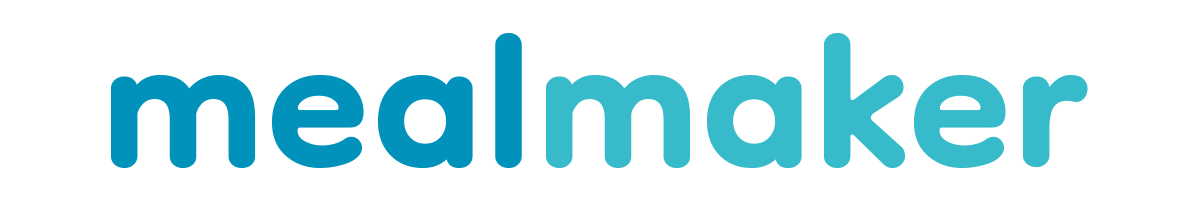
<style>
.page{position:relative;width:1200px;height:200px;background:#ffffff}
.page>*{position:absolute;margin:0}
.t1{font:300px "Dongle-Bold";color:#37bbca}
.t2{font:300px "Dongle-Bold";color:#0092ba}
</style>
<div class="page">
<p class="t1" style="left:111px;top:33px;width:977px;height:135px"><span class="t2">meal</span>maker</p>
</div>
